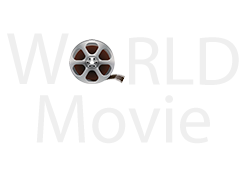
<style>
.page{position:relative;width:246px;height:186px;background:#ffffff}
.page>*{position:absolute;margin:0}
.t1{font:74.8px "MyriadPro-Regular";color:#efefef}
.t2{font:69.8px "MyriadPro-Regular";color:#efefef}
.t3{font:70px "MyriadPro-Regular";color:#efefef}
</style>
<div class="page">
<p class="t1" style="left:7px;top:33px;width:62px;height:51px">W</p>
<p class="t2" style="left:129px;top:37px;width:110px;height:48px">RLD</p>
<p class="t3" style="left:36px;top:95px;width:174px;height:49px">Movie</p>
</div>
